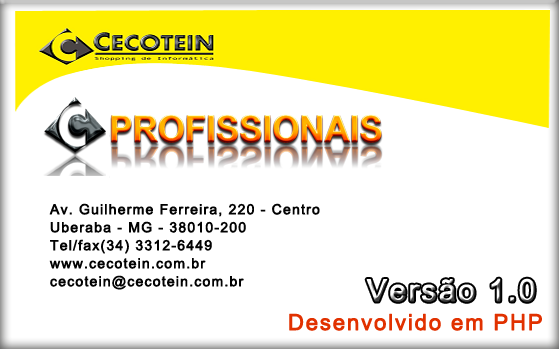
<style>
.page{position:relative;width:559px;height:349px;background:#ffffff}
.page>*{position:absolute;margin:0}
.t1{font:14px/18px "ArialMT";letter-spacing:0.06em;color:#020202;font-weight:bold}
.t2{font:22px "ArialMT";letter-spacing:0.06em;color:#e13100;font-weight:bold}
</style>
<div class="page">
<p class="t1" style="left:49px;top:203px;width:271px;height:87px;text-align:justify">Av. Guilherme Ferreira, 220 - Centro<br>Uberaba - MG - 38010-200<br>Tel/fax(34) 3312-6449<br>www.cecotein.com.br<br>cecotein@cecotein.com.br</p>
<p class="t2" style="left:289px;top:313px;width:253px;height:18px">Desenvolvido em PHP</p>
</div>
